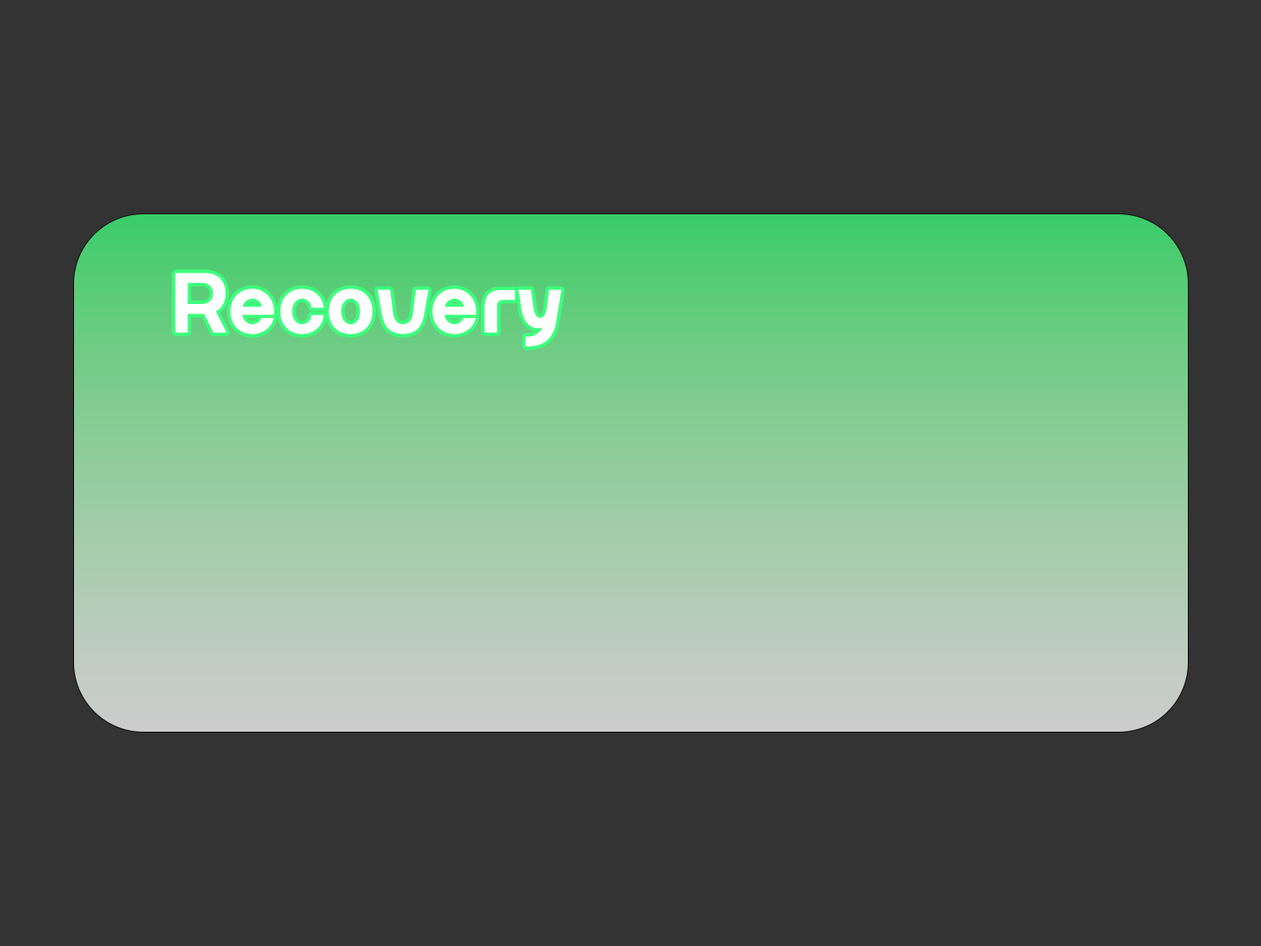
<style>
.page{position:relative;width:1261px;height:946px;background:#333333}
.page>*{position:absolute;margin:0}
.t1{font:65.3px "RiaSans-Bold";color:#ffffff}
</style>
<div class="page">
<p class="t1" style="left:175px;top:273px;width:387px;height:74px">Recovery</p>
</div>
